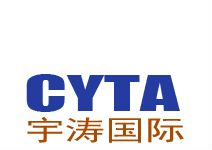
<style>
.page{position:relative;width:212px;height:150px;background:#ffffff}
.page>*{position:absolute;margin:0}
.t1{font:44.7px "Impact";color:#243ca0;scale:1.75 1}
.t2{font:28px "SimHei";color:#a84a00;scale:1.43 1}
</style>
<div class="page">
<p class="t1" style="left:26px;top:74px;width:154px;height:38px">CYTA</p>
<p class="t2" style="left:27px;top:117px;width:157px;height:26px">宇涛国际</p>
</div>
